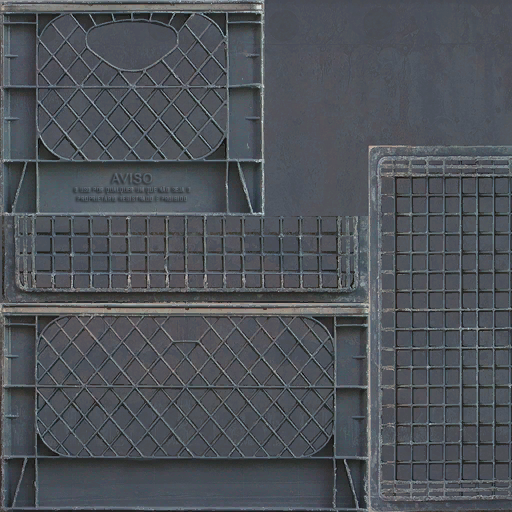
<style>
.page{position:relative;width:512px;height:512px}
.page>*{position:absolute;margin:0}
.t1{font:13.1px "ArialMT";letter-spacing:0.01em;color:#5d616d;font-weight:bold}
</style>
<div class="page">
<p class="t1" style="left:111px;top:173px;width:42px;height:11px">AVISO</p>
</div>
